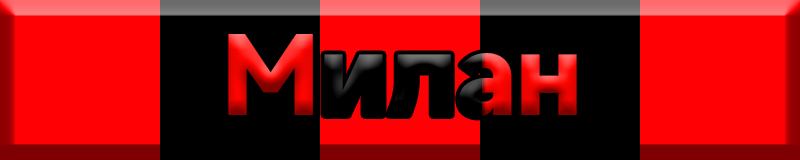
<style>
.page{position:relative;width:800px;height:160px;background:#ff0004}
.page>*{position:absolute;margin:0}
.t1{font:100px "MiSans-Heavy"}
</style>
<div class="page">
<p class="t1" style="left:228px;top:34px;width:349px;height:83px">Милан</p>
</div>
